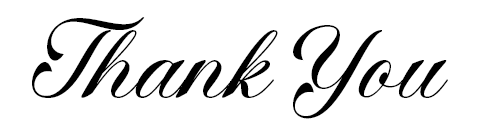
<style>
.page{position:relative;width:500px;height:130px;background:#ffffff}
.page>*{position:absolute;margin:0}
.t1{font:83.3px "AngeltaScript";color:#000000}
</style>
<div class="page">
<p class="t1" style="left:32px;top:17px;width:416px;height:102px">Thank You</p>
</div>
